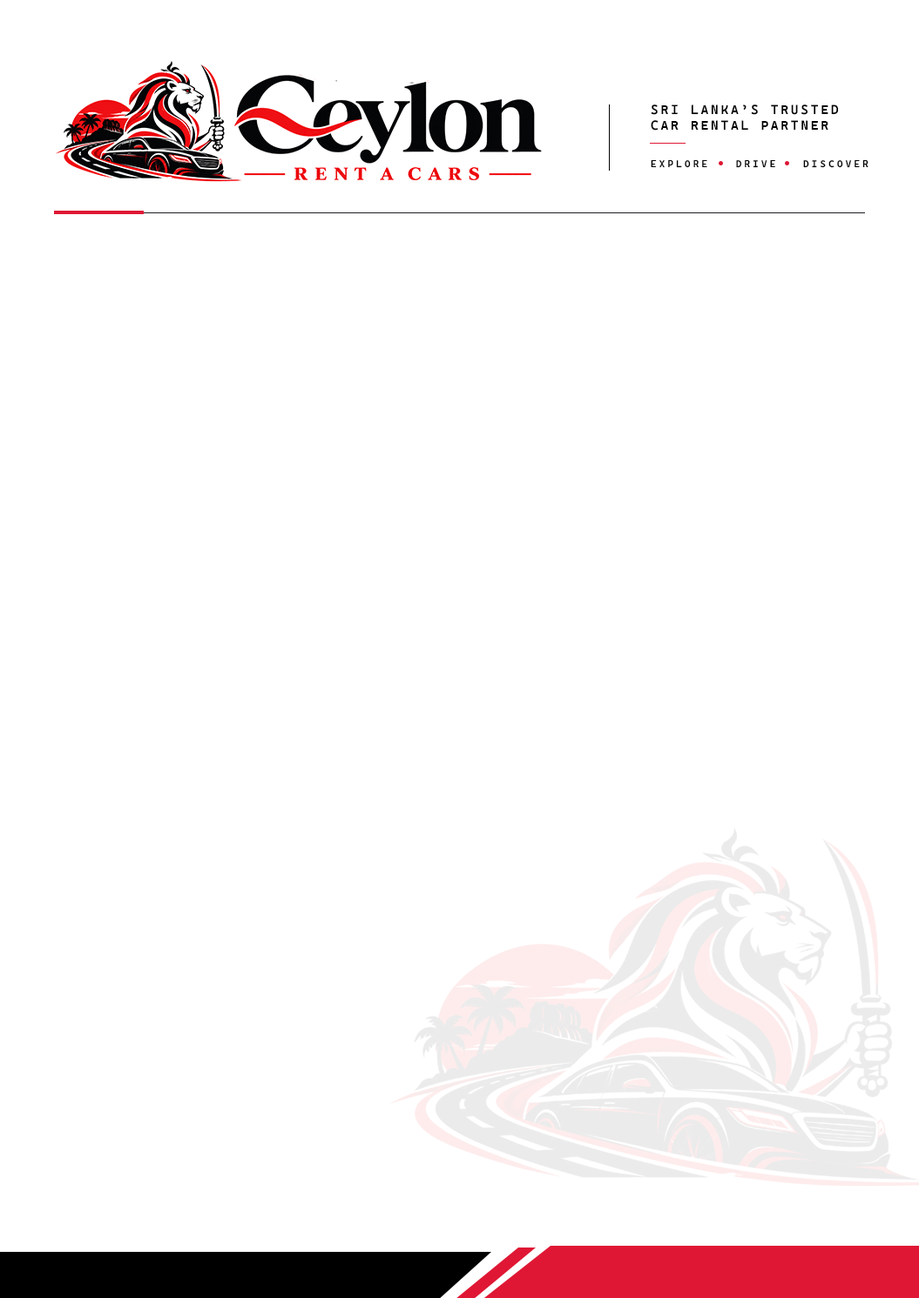
<style>
.page{position:relative;width:919px;height:1298px;background:#ffffff}
.page>*{position:absolute;margin:0}
.t1{font:13.1px "CascadiaMonoRoman-SemiBold";letter-spacing:0.18em;color:#000000}
.t2{font:9.6px "CascadiaMonoRoman-SemiBold";letter-spacing:0.3em;color:#000000}
</style>
<div class="page">
<p class="t1" style="left:650px;top:104px;width:188px;height:27px">SRI LANKA’S TRUSTED<br>CAR RENTAL PARTNER</p>
<p class="t2" style="left:650px;top:160px;width:57px;height:8px">EXPLORE</p>
<p class="t2" style="left:736px;top:160px;width:39px;height:8px">DRIVE</p>
<p class="t2" style="left:803px;top:160px;width:65px;height:8px">DISCOVER</p>
</div>
